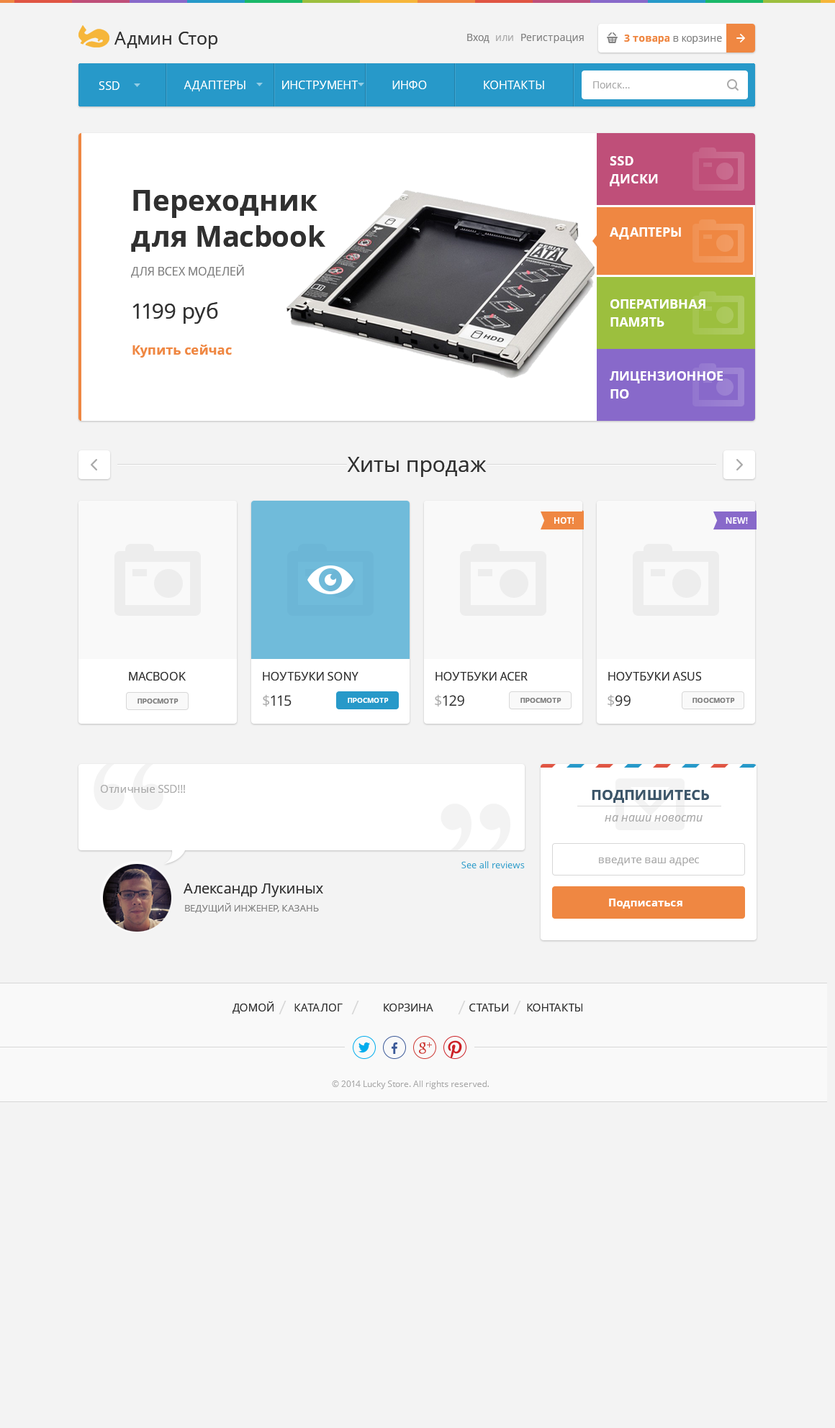
<style>
.page{position:relative;width:835px;height:1428px;background:#f3f3f3}
.page>*{position:absolute;margin:0}
.t1{font:18px "OpenSans";color:#303030}
.t2{font:10.1px "OpenSans";color:#808080}
.t3{font:10.1px "OpenSans";color:#aaaaaa}
.t4{font:10.1px "OpenSans-Bold";color:#ef8742}
.t5{font:11.5px "OpenSans";color:#ffffff;text-transform:uppercase}
.t6{font:13px/18px "OpenSans-Bold";color:#ffffff;text-transform:uppercase}
.t7{font:28.8px/36px "OpenSans-Bold";color:#303030}
.t8{font:13px "OpenSans-Bold";color:#ffffff;text-transform:uppercase}
.t9{font:11.5px "OpenSans";color:#808080;text-transform:uppercase}
.t10{font:21.6px "OpenSans";color:#303030}
.t11{font:13px "OpenSans-Bold";color:#ef8742}
.t12{font:8.6px "OpenSans-Bold";color:#ffffff;text-transform:uppercase}
.t13{font:11.5px "OpenSans";color:#303030}
.t14{font:7.2px "OpenSans-Bold";color:#808080;text-transform:uppercase}
.t15{font:14.4px "OpenSans";color:#303030}
.t16{font:14.4px "OpenSans";color:#aaaaaa}
.t17{font:7.2px "OpenSans-Bold";color:#ffffff;text-transform:uppercase}
.t18{font:10.8px "OpenSans";color:#aaaaaa}
.t19{font:14.4px "OpenSans-Bold";color:#3c5569;text-transform:uppercase}
.t20{font:11.5px "OpenSans-Italic";color:#aaaaaa}
.t21{font:9.4px "OpenSans";color:#2799c9}
.t22{font:9.4px "OpenSans";color:#808080;text-transform:uppercase}
.t23{font:10.8px "OpenSans-Bold";color:#ffffff}
.t24{font:10.8px "OpenSans";color:#303030;text-transform:uppercase}
.t25{font:8.6px "OpenSans";color:#aaaaaa}
</style>
<div class="page">
<p class="t1" style="left:114px;top:32px;width:103px;height:17px">Админ Стор</p>
<p class="t2" style="left:467px;top:34px;width:22px;height:9px">Вход</p>
<p class="t3" style="left:496px;top:35px;width:17px;height:6px">или</p>
<p class="t2" style="left:521px;top:34px;width:63px;height:9px">Регистрация</p>
<p class="t2" style="left:624px;top:35px;width:98px;height:9px"><span class="t4">3 товара </span>в корзине</p>
<p class="t5" style="left:99px;top:81px;width:20px;height:9px">SSD</p>
<p class="t5" style="left:184px;top:81px;width:61px;height:10px">Адаптеры</p>
<p class="t5" style="left:282px;top:81px;width:76px;height:8px">инструмент</p>
<p class="t5" style="left:392px;top:81px;width:35px;height:8px">Инфо</p>
<p class="t5" style="left:484px;top:81px;width:60px;height:8px">контакты</p>
<p class="t3" style="left:593px;top:81px;width:37px;height:8px">Поиск...</p>
<p class="t6" style="left:610px;top:156px;width:48px;height:30px">SSD<br>диски</p>
<p class="t7" style="left:131px;top:190px;width:194px;height:62px">Переходник<br>для Macbook</p>
<p class="t8" style="left:610px;top:227px;width:71px;height:13px">Адаптеры</p>
<p class="t9" style="left:131px;top:265px;width:113px;height:13px">для всех моделей</p>
<p class="t10" style="left:132px;top:302px;width:86px;height:22px">1199 руб</p>
<p class="t6" style="left:610px;top:299px;width:95px;height:28px">оперативная<br>Память</p>
<p class="t11" style="left:132px;top:345px;width:100px;height:13px">Купить сейчас</p>
<p class="t6" style="left:610px;top:371px;width:113px;height:28px">Лицензионное<br>ПО</p>
<p class="t10" style="left:347px;top:457px;width:139px;height:20px">Хиты продаж</p>
<p class="t12" style="left:554px;top:517px;width:20px;height:8px">Hot!</p>
<p class="t12" style="left:725px;top:517px;width:23px;height:8px">New!</p>
<p class="t13" style="left:129px;top:672px;width:57px;height:9px">MACBOOK</p>
<p class="t13" style="left:263px;top:672px;width:95px;height:9px">НОУТБУКИ SONY</p>
<p class="t13" style="left:435px;top:672px;width:92px;height:9px">НОУТБУКИ ACER</p>
<p class="t13" style="left:608px;top:672px;width:93px;height:9px">НОУТБУКИ ASUS</p>
<p class="t14" style="left:137px;top:699px;width:41px;height:5px">просмотр</p>
<p class="t15" style="left:263px;top:694px;width:28px;height:13px"><span class="t16">$</span>115</p>
<p class="t17" style="left:348px;top:698px;width:41px;height:5px">просмотр</p>
<p class="t15" style="left:435px;top:694px;width:29px;height:13px"><span class="t16">$</span>129</p>
<p class="t14" style="left:520px;top:698px;width:41px;height:5px">просмотр</p>
<p class="t15" style="left:607px;top:694px;width:23px;height:13px"><span class="t16">$</span>99</p>
<p class="t14" style="left:692px;top:698px;width:43px;height:5px">поосмотр</p>
<p class="t18" style="left:101px;top:785px;width:84px;height:8px">Отличные SSD!!!</p>
<p class="t19" style="left:592px;top:790px;width:117px;height:13px">Подпишитесь</p>
<p class="t20" style="left:604px;top:815px;width:98px;height:7px">на наши новости</p>
<p class="t18" style="left:599px;top:858px;width:100px;height:8px">введите ваш адрес</p>
<p class="t21" style="left:461px;top:861px;width:64px;height:8px">See all reviews</p>
<p class="t15" style="left:184px;top:884px;width:139px;height:13px">Александр Лукиных</p>
<p class="t22" style="left:185px;top:903px;width:134px;height:10px">ведущий инженер, Казань</p>
<p class="t23" style="left:609px;top:899px;width:73px;height:10px">Подписаться</p>
<p class="t24" style="left:232px;top:1002px;width:41px;height:12px">Домой</p>
<p class="t24" style="left:294px;top:1004px;width:49px;height:8px">каталог</p>
<p class="t24" style="left:384px;top:1004px;width:49px;height:8px">корзина</p>
<p class="t24" style="left:469px;top:1004px;width:39px;height:8px">статьи</p>
<p class="t24" style="left:527px;top:1004px;width:55px;height:8px">контакты</p>
<p class="t25" style="left:332px;top:1081px;width:157px;height:9px">© 2014 Lucky Store. All rights reserved.</p>
</div>
